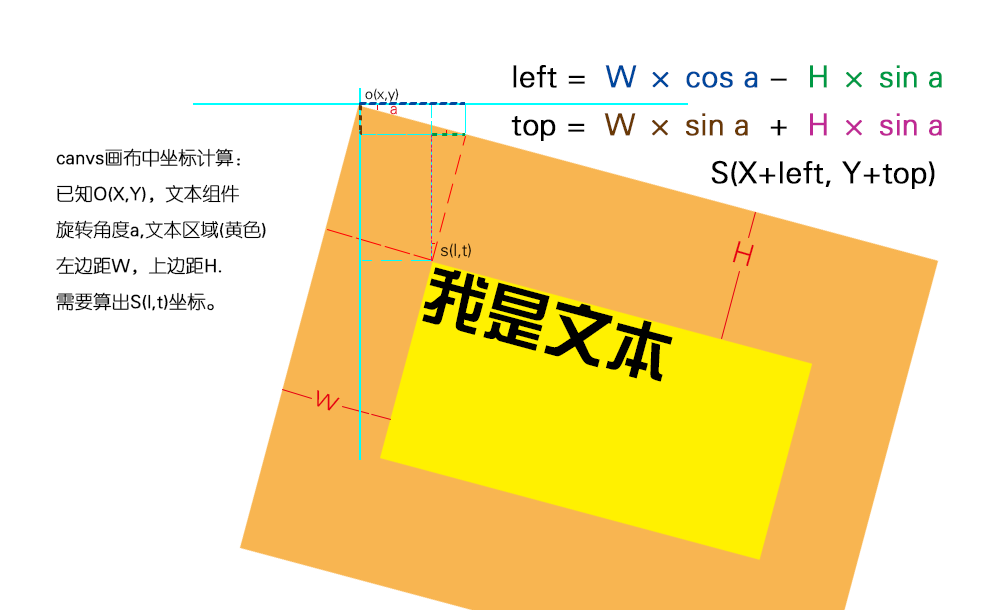
<style>
.page{position:relative;width:1000px;height:610px;background:#ffffff}
.page>*{position:absolute;margin:0}
.t1{font:30px/48px "FZY1JW--GB1-0";color:#000000;font-weight:bold}
.t2{font:30px/48px "FZY1JW--GB1-0";color:#00479d;font-weight:bold}
.t3{font:30px/48px "FZY1JW--GB1-0";color:#009944;font-weight:bold}
.t4{font:30px/48px "FZY1JW--GB1-0";color:#6a3906;font-weight:bold}
.t5{font:30px/48px "FZY1JW--GB1-0";color:#bf2994;font-weight:bold}
.t6{font:14.3px "FZY1JW--GB1-0";color:#000000}
.t7{font:15.6px "FZY1JW--GB1-0"}
.t8{font:18px/36px "FZY1JW--GB1-0";color:#000000;font-weight:bold}
.t9{font:17px "FZY1JW--GB1-0";color:#000000}
.t10{font:30px "FZY1JW--GB1-0";color:#e60012}
.t11{font:63.8px "HYk1gj";color:#000000}
</style>
<div class="page">
<p class="t1" style="left:511px;top:65px;width:431px;height:124px;text-align:justify">left =  <span class="t2">W × cos a</span> -  <span class="t3">H × sin a</span> <br>top =  <span class="t4">W × sin a</span>  +  <span class="t5">H × sin a</span> <br>          S(X+left, Y+top)</p>
<p class="t6" style="left:365px;top:88px;width:34px;height:14px">o(x,y)</p>
<p class="t7" style="left:390px;top:105px;width:7px;height:10px">a</p>
<p class="t8" style="left:56px;top:148px;width:210px;height:163px;text-align:justify">canvs画布中坐标计算：<br>已知O(X,Y)，文本组件<br>旋转角度a,文本区域(黄色)<br>左边距W，上边距H.<br>需要算出S(l,t)坐标。</p>
<p class="t9" style="left:441px;top:243px;width:30px;height:16px">s(l,t)</p>
<p class="t10" style="left:732px;top:241px;width:22px;height:26px;rotate:16deg">H</p>
<p class="t11" style="left:422px;top:267px;width:251px;height:115px;rotate:15deg">我是文本</p>
<p class="t10" style="left:317px;top:390px;width:23px;height:21px;rotate:20deg">w</p>
</div>
